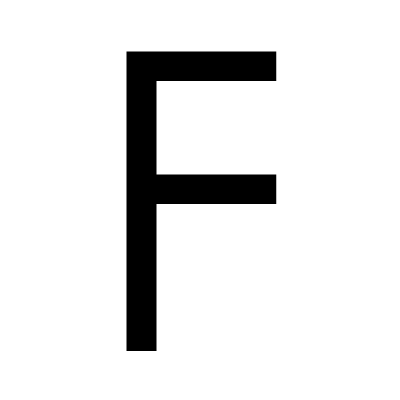
<style>
.page{position:relative;width:400px;height:400px;background:#ffffff}
.page>*{position:absolute;margin:0}
.t1{font:416.7px "CenturyGothic";color:#000000}
</style>
<div class="page">
<p class="t1" style="left:126px;top:51px;width:151px;height:300px">F</p>
</div>
